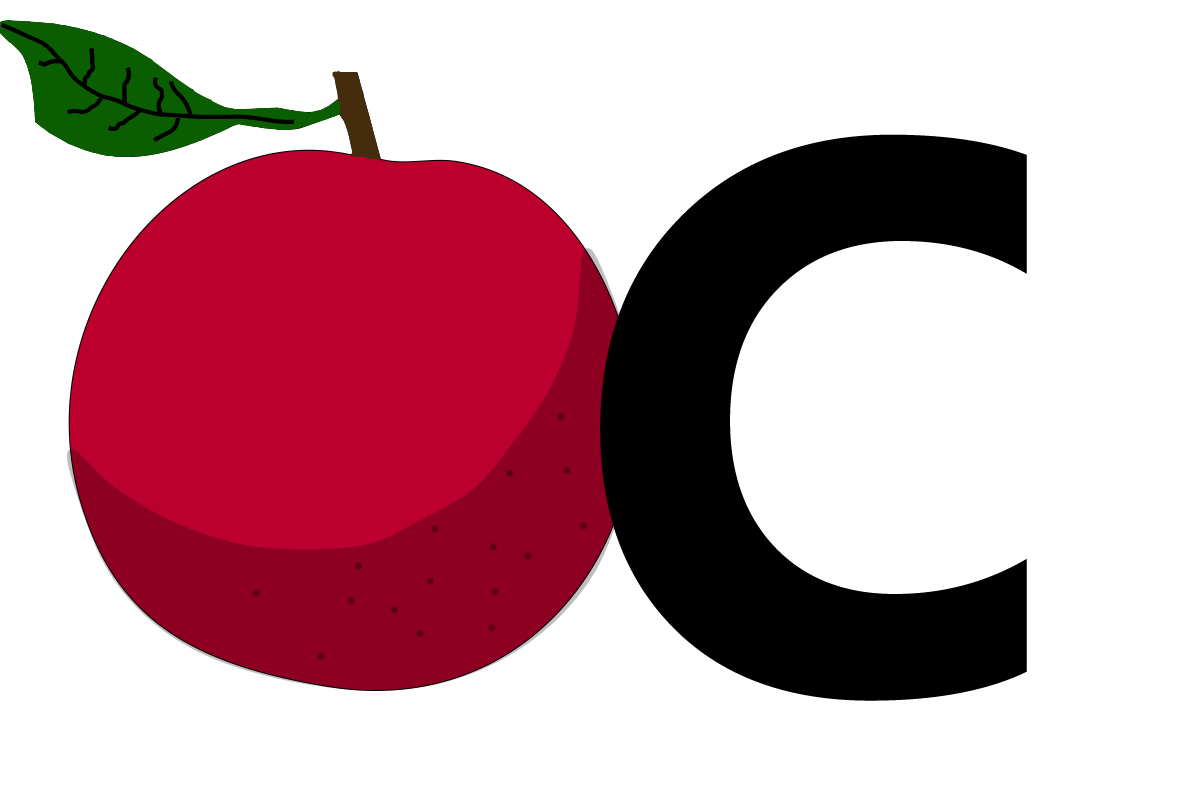
<style>
.page{position:relative;width:1200px;height:800px;background:#ffffff}
.page>*{position:absolute;margin:0}
.t1{font:781.2px "Gadugi-Bold";color:#000000}
</style>
<div class="page">
<p class="t1" style="left:600px;top:134px;width:427px;height:567px">C</p>
</div>
